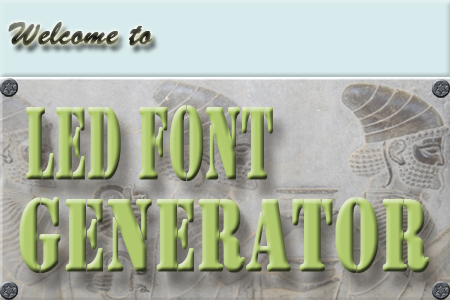
<style>
.page{position:relative;width:450px;height:300px}
.page>*{position:absolute;margin:0}
.t1{font:37.5px "BrushScriptMT";font-weight:bold}
.t2{font:106.9px "Stencil";font-weight:bold;scale:0.5 1}
.t3{font:106.9px "Stencil";font-weight:bold;scale:0.65 1}
</style>
<div class="page">
<p class="t1" style="left:8px;top:22px;width:144px;height:24px">Welcome to</p>
<p class="t2" style="left:26px;top:105px;width:247px;height:76px">LED FONT</p>
<p class="t3" style="left:19px;top:197px;width:411px;height:76px">GENERATOR</p>
</div>
